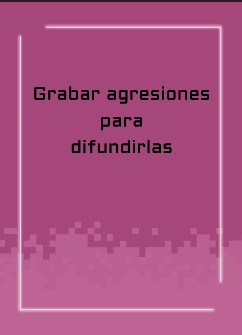
<style>
.page{position:relative;width:242px;height:335px;background:#a6477b}
.page>*{position:absolute;margin:0}
.t1{font:18.3px/26.7px "Aldrich-Regular";letter-spacing:0.015em;color:#000000}
</style>
<div class="page">
<p class="t1" style="left:34px;top:86px;width:176px;height:68px;text-align:center">Grabar agresiones<br>para<br>difundirlas</p>
</div>
